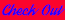
<style>
.page{position:relative;width:65px;height:20px;background:#fb042d}
.page>*{position:absolute;margin:0}
.t1{font:11.3px "Streetwear";color:#2501fe;scale:0.93 1}
</style>
<div class="page">
<p class="t1" style="left:2px;top:4px;width:63px;height:12px">Check Out</p>
</div>
